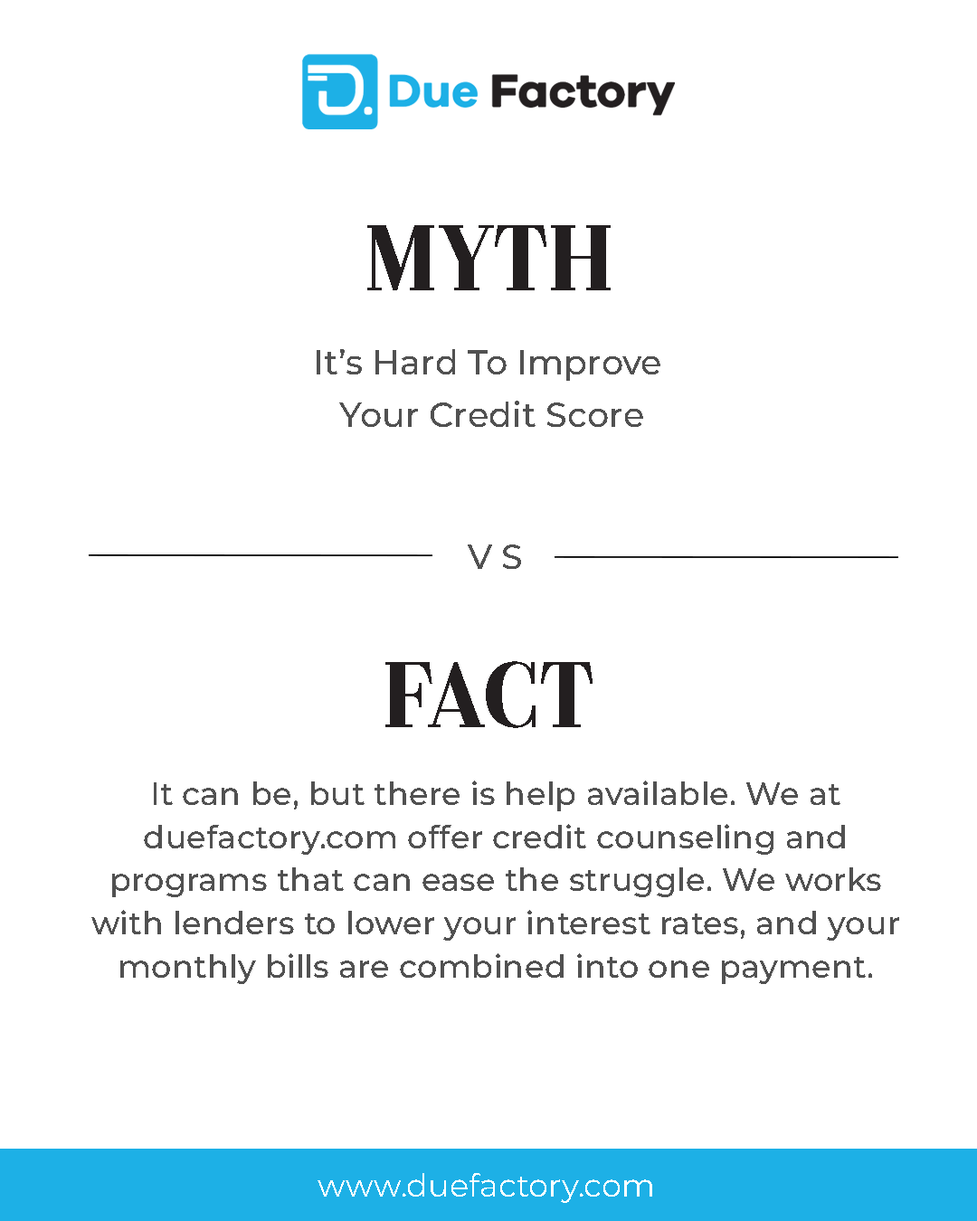
<style>
.page{position:relative;width:977px;height:1221px;background:#ffffff}
.page>*{position:absolute;margin:0}
.t1{font:81px "Couturier-SemiBold";color:#231f20}
.t2{font:33.9px/52.9px "Montserrat-Medium";color:#515151}
.t3{font:33.9px "Montserrat-Medium";color:#515151}
.t4{font:32px/43.1px "Montserrat-Medium";color:#515151}
.t5{font:32px "Montserrat-Regular";color:#ffffff}
</style>
<div class="page">
<p class="t1" style="left:367px;top:225px;width:243px;height:65px">MYTH</p>
<p class="t2" style="left:317px;top:349px;width:343px;height:78px;text-align:center">It’s Hard To Improve <br>Your Credit Score</p>
<p class="t3" style="left:468px;top:544px;width:53px;height:25px">V S</p>
<p class="t1" style="left:385px;top:661px;width:207px;height:67px">FACT</p>
<p class="t4" style="left:91px;top:780px;width:808px;height:204px;text-align:center">It can be, but there is help available. We at           duefactory.com offer credit counseling and         programs that can ease the struggle. We works with lenders to lower your interest rates, and your monthly bills are combined into one payment.</p>
<p class="t5" style="left:317px;top:1173px;width:335px;height:30px">www.duefactory.com</p>
</div>
